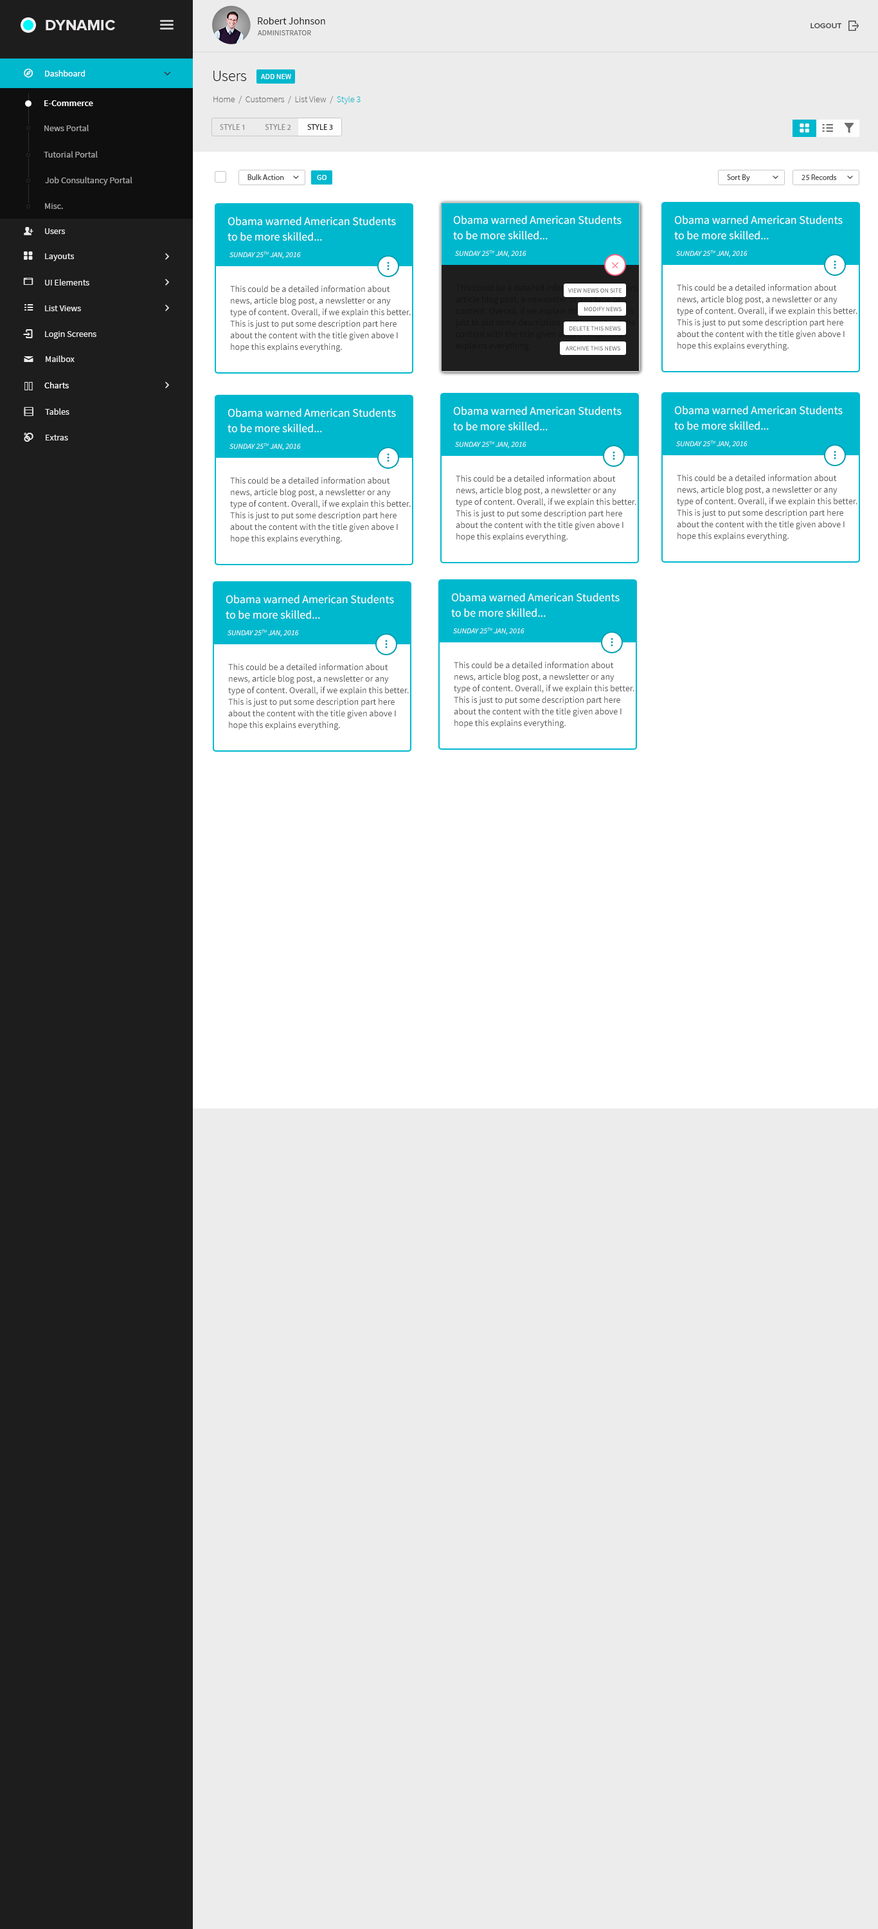
<style>
.page{position:relative;width:878px;height:1929px;background:#ececec}
.page>*{position:absolute;margin:0}
.t1{font:10.3px "SourceSansPro-Regular";color:#1d1d1d}
.t2{font:15.4px "ProximaNova-Bold";color:#eae7e7;text-transform:uppercase}
.t3{font:7.7px "ProximaNova-Semibold";color:#535353;font-variant:small-caps}
.t4{font:7.7px "SourceSansPro-Regular";color:#767575}
.t5{font:9px "SourceSansPro-Regular";color:#ffffff}
.t6{font:9px "SourceSansPro-Regular";color:#ffffff;font-variant:small-caps}
.t7{font:15.4px "SourceSansPro-Light";color:#010101}
.t8{font:7.7px "SourceSansPro-Regular";color:#ffffff;text-transform:uppercase}
.t9{font:9px "SourceSansPro-Semibold";color:#ffffff}
.t10{font:9px "SourceSansPro-Light";color:#6d6c6c}
.t11{font:9px "SourceSansPro-Light";color:#00b8ce}
.t12{font:9px "SourceSansPro-Regular";color:#a6a5a5}
.t13{font:7.7px "MyriadPro-Regular";color:#8f8f8f;text-transform:uppercase}
.t14{font:7.7px "MyriadPro-Regular";color:#8a8a8a;text-transform:uppercase}
.t15{font:7.7px "MyriadPro-Regular";color:#2b2b2b;text-transform:uppercase}
.t16{font:8.8px "SourceSansPro-Regular";color:#a6a5a5}
.t17{font:7.7px "MyriadPro-Regular";color:#4e4e4e}
.t18{font:11.6px/15.4px "SourceSansPro-Regular";color:#ffffff}
.t19{font:9px "SourceSansPro-Regular";color:#ebebeb}
.t20{font:7.7px "SourceSansPro-It";color:#ffffff;text-transform:uppercase}
.t21{font:9px/11.6px "SourceSansPro-Regular";color:#565555}
.t22{font:6.4px "SourceSansPro-Regular";color:#505050;text-transform:uppercase}
.t23{font:8.8px "SourceSansPro-Regular";color:#ebebeb}
</style>
<div class="page">
<p class="t1" style="left:258px;top:17px;width:67px;height:7px">Robert Johnson</p>
<p class="t2" style="left:46px;top:20px;width:69px;height:10px">DYNAMIC</p>
<p class="t3" style="left:811px;top:23px;width:31px;height:5px">LOGOUT</p>
<p class="t4" style="left:257px;top:30px;width:54px;height:5px">ADMINISTRATOR</p>
<p class="t5" style="left:45px;top:70px;width:40px;height:6px"><span class="t6">D</span>ashboard</p>
<p class="t7" style="left:213px;top:71px;width:33px;height:10px">Users</p>
<p class="t8" style="left:260px;top:74px;width:31px;height:5px">add new</p>
<p class="t9" style="left:44px;top:100px;width:49px;height:6px">E-Commerce</p>
<p class="t10" style="left:213px;top:96px;width:148px;height:8px">Home  /  Customers  /  List View  /  <span class="t11">Style 3</span></p>
<p class="t12" style="left:44px;top:125px;width:45px;height:6px">News Portal</p>
<p class="t13" style="left:220px;top:124px;width:113px;height:6px">Style 1            <span class="t14">Style 2          </span><span class="t15">Style 3</span></p>
<p class="t16" style="left:44px;top:151px;width:54px;height:7px">Tutorial Portal</p>
<p class="t16" style="left:45px;top:177px;width:87px;height:8px">Job Consultancy Portal</p>
<p class="t17" style="left:248px;top:174px;width:36px;height:6px">Bulk Action</p>
<p class="t8" style="left:317px;top:175px;width:10px;height:5px">go</p>
<p class="t17" style="left:727px;top:174px;width:23px;height:8px">Sort By</p>
<p class="t17" style="left:802px;top:174px;width:35px;height:6px">25 Records</p>
<p class="t16" style="left:45px;top:203px;width:18px;height:6px">Misc.</p>
<p class="t18" style="left:228px;top:217px;width:168px;height:24px">Obama warned American Students<br>to be more skilled...</p>
<p class="t18" style="left:453px;top:215px;width:169px;height:25px">Obama warned American Students<br>to be more skilled...</p>
<p class="t18" style="left:674px;top:215px;width:169px;height:25px">Obama warned American Students<br>to be more skilled...</p>
<p class="t19" style="left:45px;top:228px;width:20px;height:6px">Users</p>
<p class="t19" style="left:45px;top:253px;width:29px;height:8px">Layouts</p>
<p class="t20" style="left:230px;top:251px;width:71px;height:7px">SUNDAY 25TH jAN, 2016</p>
<p class="t20" style="left:455px;top:250px;width:71px;height:7px">SUNDAY 25TH jAN, 2016</p>
<p class="t20" style="left:676px;top:250px;width:72px;height:7px">SUNDAY 25TH jAN, 2016</p>
<p class="t19" style="left:45px;top:279px;width:44px;height:6px">UI Elements</p>
<p class="t21" style="left:230px;top:285px;width:181px;height:67px">This could be a detailed information about <br>news, article blog post, a newsletter or any <br>type of content. Overall, if we explain this better. <br>This is just to put some description part here <br>about the content with the title given above I <br>hope this explains everything.</p>
<p class="t22" style="left:568px;top:288px;width:54px;height:4px">view news on site</p>
<p class="t21" style="left:677px;top:284px;width:181px;height:67px">This could be a detailed information about <br>news, article blog post, a newsletter or any <br>type of content. Overall, if we explain this better. <br>This is just to put some description part here <br>about the content with the title given above I <br>hope this explains everything.</p>
<p class="t19" style="left:45px;top:305px;width:36px;height:6px">List Views</p>
<p class="t22" style="left:584px;top:307px;width:38px;height:4px">Modify news</p>
<p class="t22" style="left:570px;top:326px;width:51px;height:4px">delete this news</p>
<p class="t19" style="left:45px;top:331px;width:51px;height:8px">Login Screens</p>
<p class="t22" style="left:566px;top:346px;width:54px;height:4px">archive this news</p>
<p class="t19" style="left:46px;top:356px;width:29px;height:6px">Mailbox</p>
<p class="t5" style="left:44px;top:382px;width:25px;height:6px">Charts</p>
<p class="t23" style="left:45px;top:408px;width:24px;height:7px">Tables</p>
<p class="t18" style="left:228px;top:408px;width:168px;height:25px">Obama warned American Students<br>to be more skilled...</p>
<p class="t18" style="left:453px;top:406px;width:169px;height:25px">Obama warned American Students<br>to be more skilled...</p>
<p class="t18" style="left:674px;top:406px;width:169px;height:24px">Obama warned American Students<br>to be more skilled...</p>
<p class="t23" style="left:46px;top:435px;width:22px;height:5px">Extras</p>
<p class="t20" style="left:230px;top:443px;width:71px;height:7px">SUNDAY 25TH jAN, 2016</p>
<p class="t20" style="left:455px;top:441px;width:71px;height:7px">SUNDAY 25TH jAN, 2016</p>
<p class="t20" style="left:676px;top:440px;width:72px;height:7px">SUNDAY 25TH jAN, 2016</p>
<p class="t21" style="left:677px;top:474px;width:181px;height:67px">This could be a detailed information about <br>news, article blog post, a newsletter or any <br>type of content. Overall, if we explain this better. <br>This is just to put some description part here <br>about the content with the title given above I <br>hope this explains everything.</p>
<p class="t21" style="left:230px;top:476px;width:181px;height:68px">This could be a detailed information about <br>news, article blog post, a newsletter or any <br>type of content. Overall, if we explain this better. <br>This is just to put some description part here <br>about the content with the title given above I <br>hope this explains everything.</p>
<p class="t21" style="left:456px;top:474px;width:180px;height:68px">This could be a detailed information about <br>news, article blog post, a newsletter or any <br>type of content. Overall, if we explain this better. <br>This is just to put some description part here <br>about the content with the title given above I <br>hope this explains everything.</p>
<p class="t18" style="left:451px;top:593px;width:169px;height:24px">Obama warned American Students<br>to be more skilled...</p>
<p class="t18" style="left:226px;top:595px;width:168px;height:24px">Obama warned American Students<br>to be more skilled...</p>
<p class="t20" style="left:228px;top:629px;width:71px;height:7px">SUNDAY 25TH jAN, 2016</p>
<p class="t20" style="left:453px;top:627px;width:72px;height:7px">SUNDAY 25TH jAN, 2016</p>
<p class="t21" style="left:228px;top:663px;width:181px;height:67px">This could be a detailed information about <br>news, article blog post, a newsletter or any <br>type of content. Overall, if we explain this better. <br>This is just to put some description part here <br>about the content with the title given above I <br>hope this explains everything.</p>
<p class="t21" style="left:454px;top:661px;width:180px;height:67px">This could be a detailed information about <br>news, article blog post, a newsletter or any <br>type of content. Overall, if we explain this better. <br>This is just to put some description part here <br>about the content with the title given above I <br>hope this explains everything.</p>
</div>
